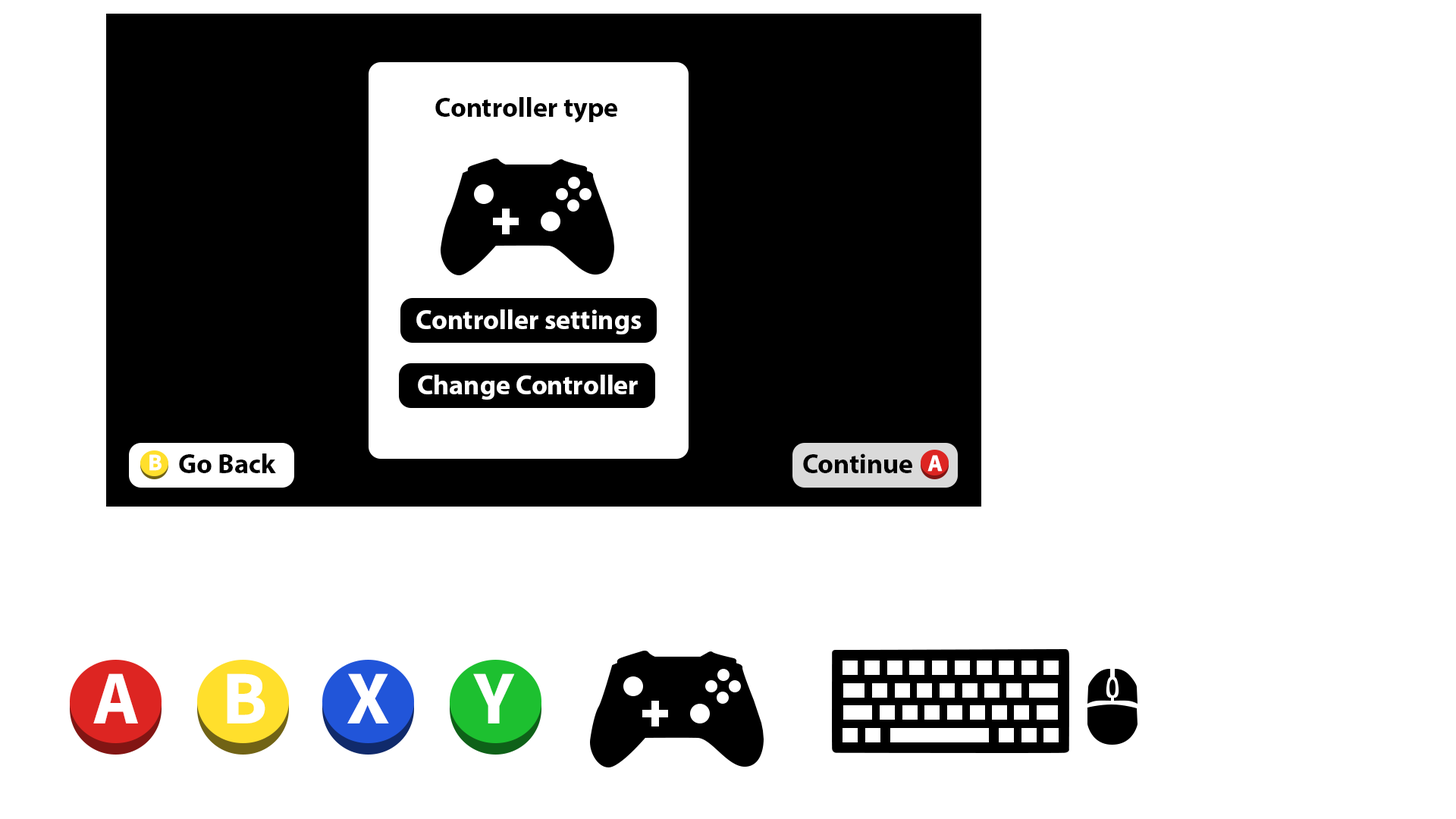
<style>
.page{position:relative;width:1456px;height:819px;background:#ffffff}
.page>*{position:absolute;margin:0}
.t1{font:27.3px "MyriadPro-Bold";color:#000000}
.t2{font:27.3px "MyriadPro-Bold";color:#ffffff}
.t3{font:23.5px "SourceSans3Roman-Bold";color:#ffffff}
.t4{font:23.8px "SourceSans3Roman-Bold";color:#ffffff}
.t5{font:75.8px "SourceSans3Roman-Bold";color:#ffffff}
</style>
<div class="page">
<p class="t1" style="left:435px;top:97px;width:182px;height:26px">Controller type</p>
<p class="t2" style="left:416px;top:309px;width:226px;height:25px">Controller settings</p>
<p class="t2" style="left:418px;top:375px;width:220px;height:25px">Change Controller</p>
<p class="t3" style="left:149px;top:454px;width:13px;height:17px">B</p>
<p class="t1" style="left:179px;top:453px;width:97px;height:20px">Go Back</p>
<p class="t1" style="left:803px;top:453px;width:109px;height:20px">Continue</p>
<p class="t4" style="left:927px;top:455px;width:16px;height:17px">A</p>
<p class="t5" style="left:93px;top:673px;width:45px;height:50px">A</p>
<p class="t5" style="left:227px;top:673px;width:38px;height:50px">B</p>
<p class="t5" style="left:347px;top:673px;width:42px;height:50px">X</p>
<p class="t5" style="left:473px;top:673px;width:42px;height:50px">Y</p>
</div>
